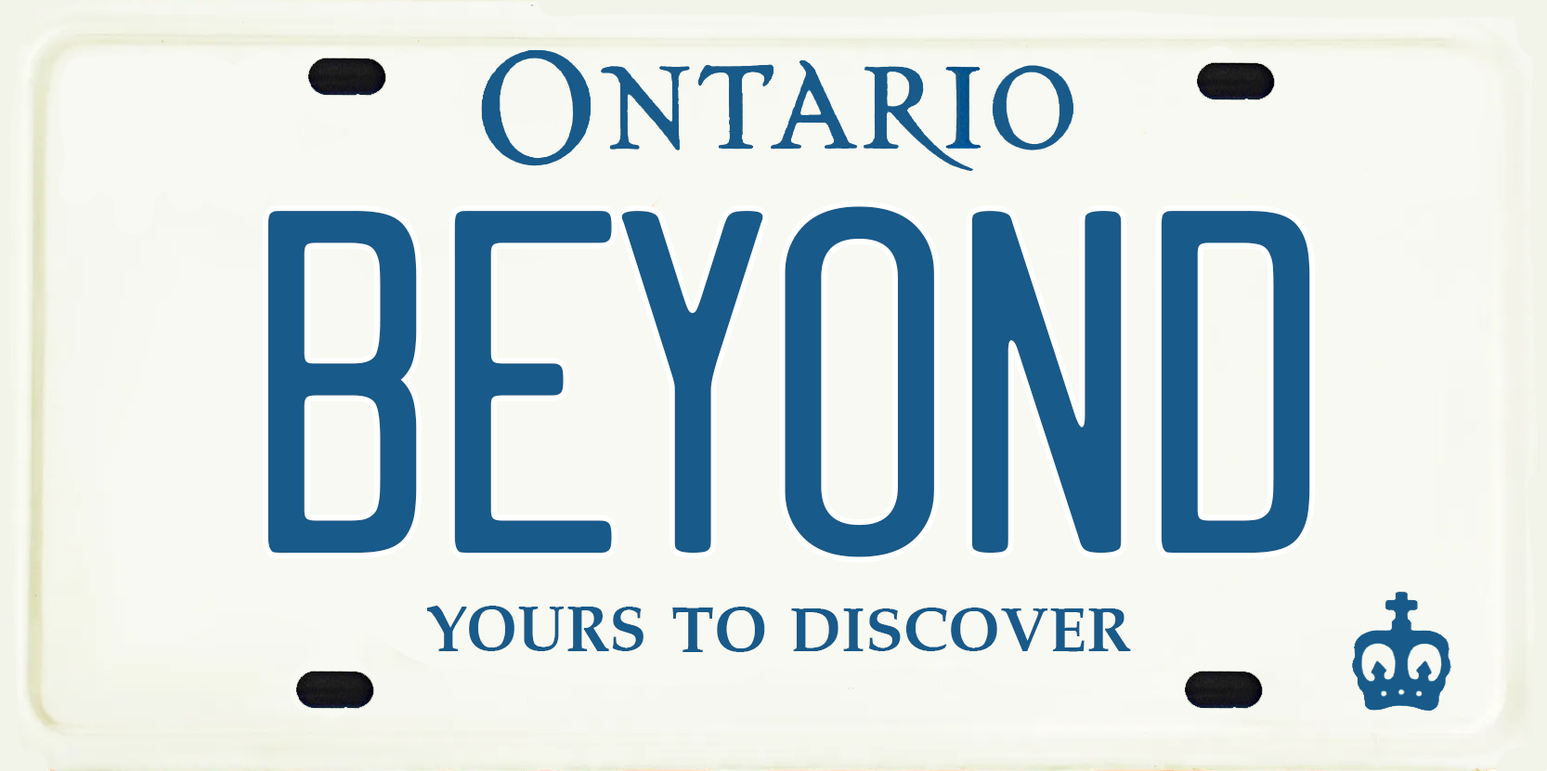
<style>
.page{position:relative;width:1547px;height:771px;background:#f8f9f2}
.page>*{position:absolute;margin:0}
.t1{font:427px "DriverGothic";color:#185a8a;scale:1.06 1}
.t2{font:65px "Palatino-Bold";color:#185a8a;scale:0.94 1}
.t3{font:64.6px "Palatino-Bold";color:#185a8a}
.t4{font:62.1px "Palatino-Bold";color:#185a8a}
</style>
<div class="page">
<p class="t1" style="left:267px;top:206px;width:1043px;height:351px">BEYOND</p>
<p class="t2" style="left:427px;top:605px;width:217px;height:46px">YOURS</p>
<p class="t3" style="left:672px;top:606px;width:93px;height:46px">TO</p>
<p class="t4" style="left:791px;top:607px;width:340px;height:45px">DISCOVER</p>
</div>
